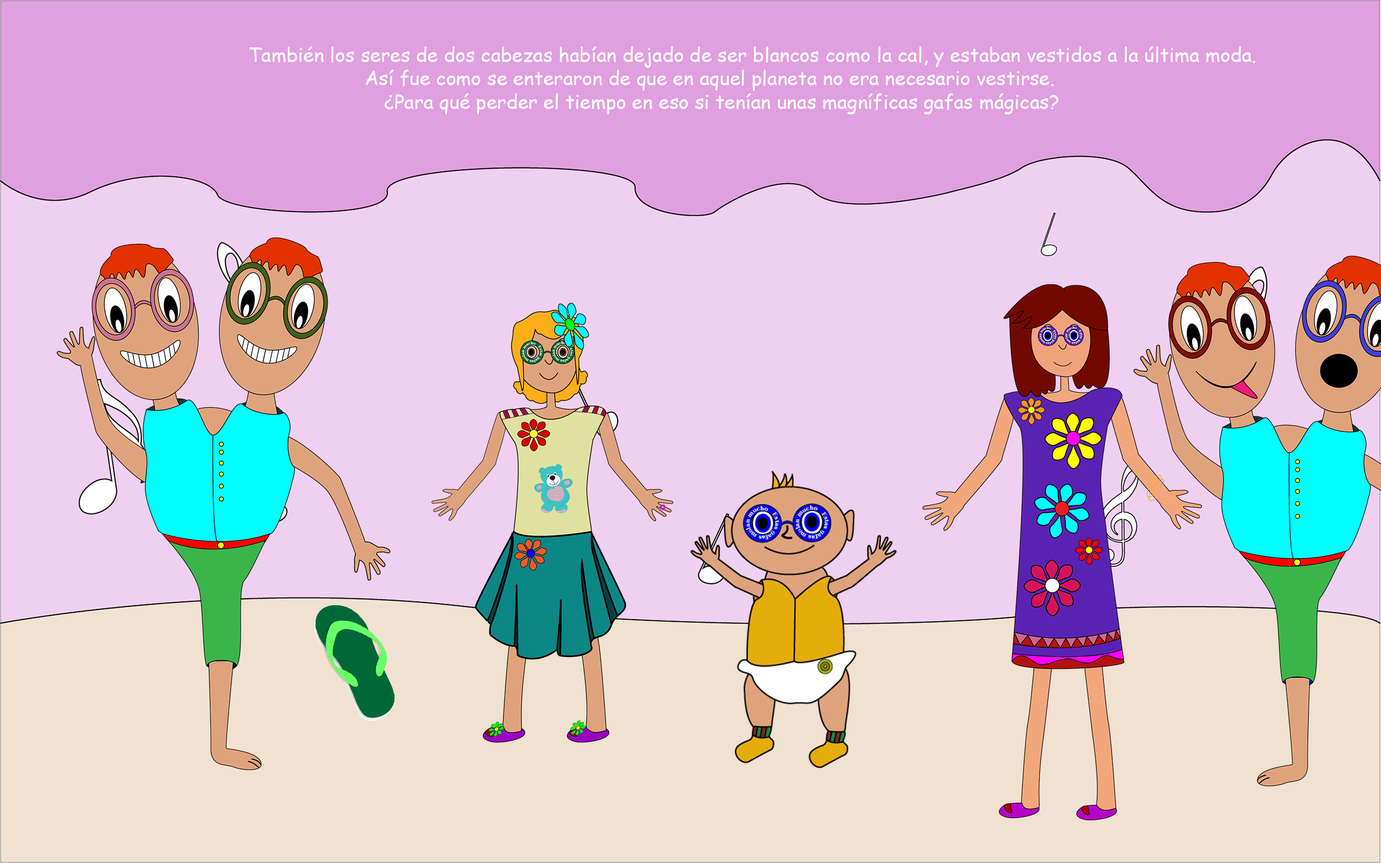
<style>
.page{position:relative;width:1381px;height:863px;background:#efd0f0}
.page>*{position:absolute;margin:0}
.t1{font:19.4px "ComicSansMS";color:#ffffff}
</style>
<div class="page">
<p class="t1" style="left:249px;top:46px;width:1007px;height:68px">También los seres de dos cabezas habían dejado de ser blancos como la cal, y estaban vestidos a la última moda.<br>      Así fue como se enteraron de que en aquel planeta no era necesario vestirse. <br>       ¿Para qué perder el tiempo en eso si tenían unas magníficas gafas mágicas?</p>
</div>
